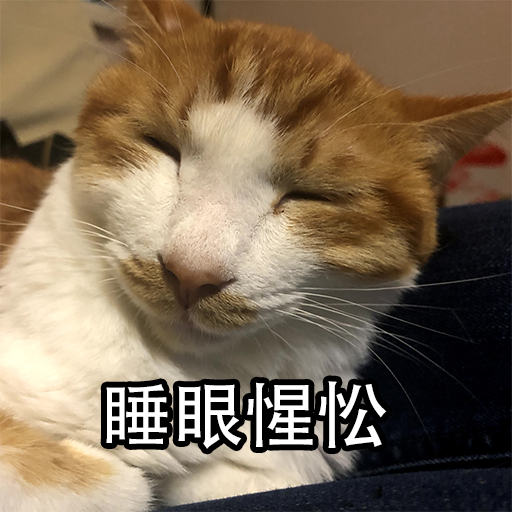
<style>
.page{position:relative;width:512px;height:512px}
.page>*{position:absolute;margin:0}
.t1{font:72px "AdobeHeitiStd-Regular";color:#ffffff}
</style>
<div class="page">
<p class="t1" style="left:106px;top:381px;width:281px;height:68px">睡眼惺忪</p>
</div>
